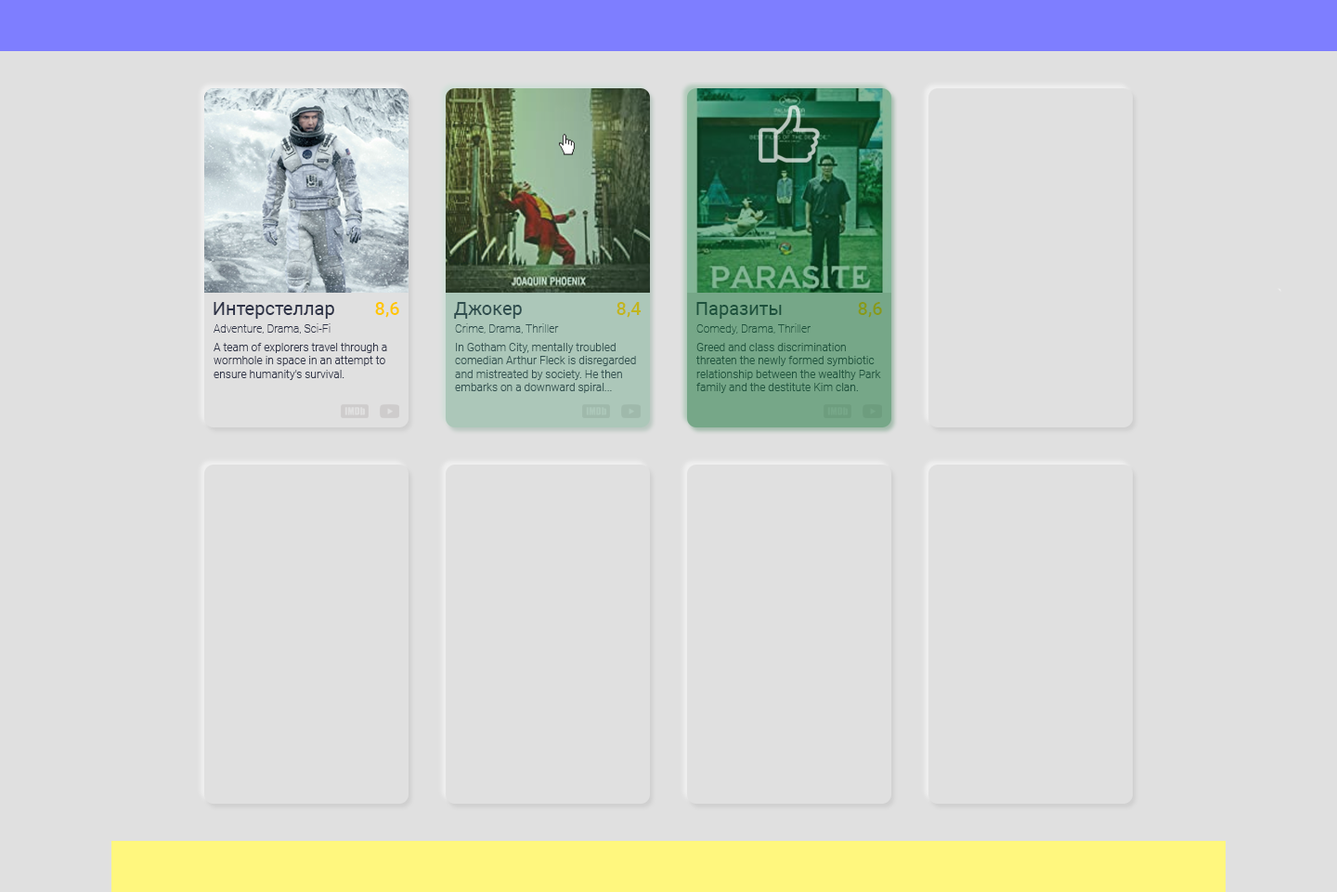
<style>
.page{position:relative;width:1337px;height:892px;background:#e0e0e0}
.page>*{position:absolute;margin:0}
.t1{font:18.6px "Roboto-Regular";color:#2e3347}
.t2{font:18.6px "Roboto-Medium";color:#ffc600}
.t3{font:18.6px "Roboto-Regular";color:#304e4e}
.t4{font:18.6px "Roboto-Medium";color:#c1b51d}
.t5{font:18.6px "Roboto-Regular";color:#1d513c}
.t6{font:18.6px "Roboto-Medium";color:#869a19}
.t7{font:11.1px "Roboto-Thin";color:#2e3347}
.t8{font:11.1px "Roboto-Thin";color:#304e4e}
.t9{font:11.1px "Roboto-Thin";color:#1d513c}
.t10{font:11.1px "Roboto-Light";color:#2e3347}
.t11{font:11.1px "Roboto-Light";color:#304e4e}
.t12{font:11.1px "Roboto-Light";color:#1d513c}
</style>
<div class="page">
<p class="t1" style="left:214px;top:302px;width:120px;height:17px">Интерстеллар</p>
<p class="t2" style="left:375px;top:302px;width:24px;height:16px">8,6</p>
<p class="t3" style="left:454px;top:302px;width:68px;height:17px">Джокер</p>
<p class="t4" style="left:617px;top:302px;width:25px;height:16px">8,4</p>
<p class="t5" style="left:697px;top:302px;width:85px;height:17px">Паразиты</p>
<p class="t6" style="left:858px;top:302px;width:24px;height:16px">8,6</p>
<p class="t7" style="left:214px;top:323px;width:117px;height:10px">Adventure, Drama, Sci-Fi</p>
<p class="t8" style="left:455px;top:323px;width:104px;height:10px">Crime, Drama, Thriller</p>
<p class="t9" style="left:697px;top:323px;width:114px;height:11px">Comedy, Drama, Thriller</p>
<p class="t10" style="left:214px;top:343px;width:173px;height:37px">A team of explorers travel through a wormhole in space in an attempt to ensure humanity's survival.</p>
<p class="t11" style="left:455px;top:343px;width:181px;height:50px">In Gotham City, mentally troubled comedian Arthur Fleck is disregarded and mistreated by society. He then embarks on a downward spiral... revolution and bloody crime. This path brings him face-to-face with his alter-ego: the Joker.</p>
<p class="t12" style="left:697px;top:343px;width:184px;height:50px">Greed and class discrimination threaten the newly formed symbiotic relationship between the wealthy Park family and the destitute Kim clan.</p>
</div>
